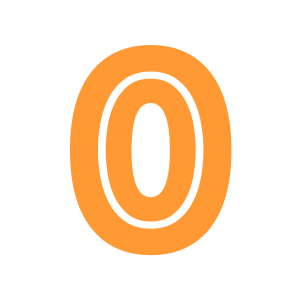
<style>
.page{position:relative;width:300px;height:300px;background:#ffffff}
.page>*{position:absolute;margin:0}
.t1{font:300px "Phosphate-Inline";color:#ff9933}
</style>
<div class="page">
<p class="t1" style="left:70px;top:45px;width:162px;height:211px">0</p>
</div>
